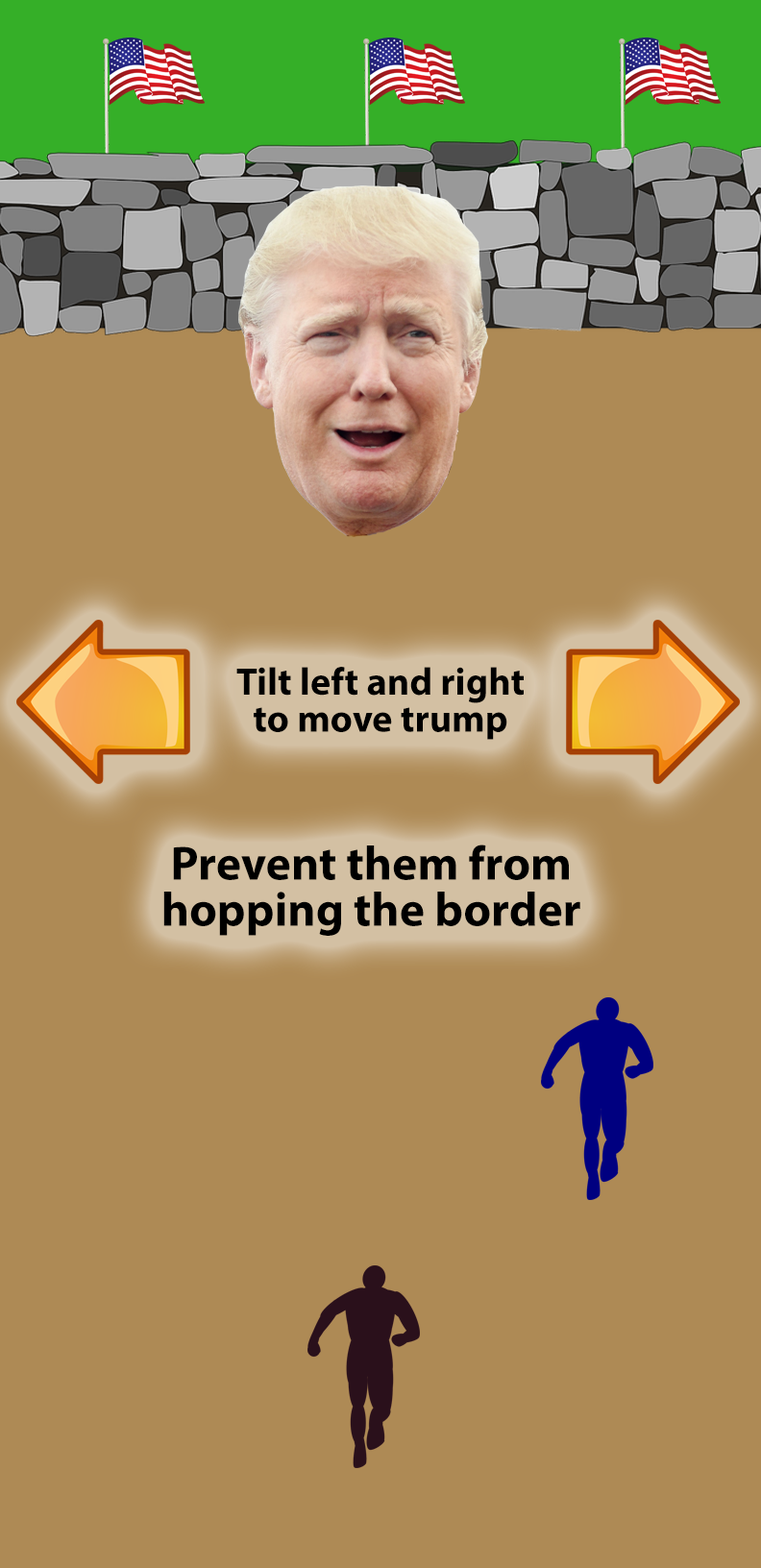
<style>
.page{position:relative;width:761px;height:1568px;background:#ae8a55}
.page>*{position:absolute;margin:0}
.t1{font:9.3px/18.5px "MyriadPro-Bold";color:#000000}
.t2{font:11.5px/23.1px "MyriadPro-Bold";color:#000000}
</style>
<div class="page">
<p class="t1" style="left:236px;top:667px;width:287px;height:73px;text-align:center">Tilt left and right<br> <br>to move trump</p>
<p class="t2" style="left:163px;top:844px;width:417px;height:92px;text-align:center">Prevent them from<br><br>hopping the border</p>
</div>
